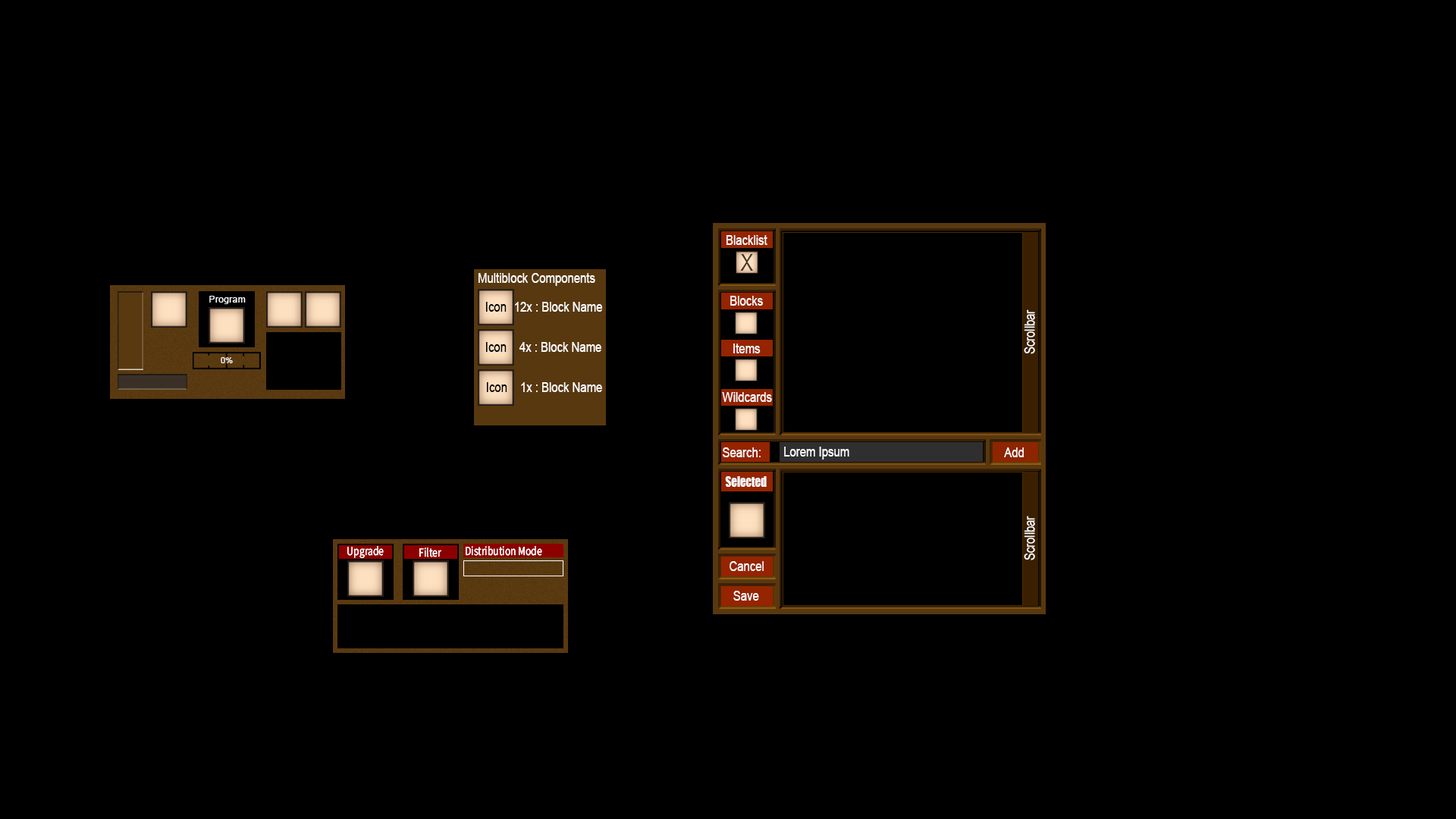
<style>
.page{position:relative;width:1456px;height:819px;background:#000000}
.page>*{position:absolute;margin:0}
.t1{font:13.8px "ArialMT";color:#ffffff;scale:0.82 1}
.t2{font:22.9px "ArialMT";color:#3f352c;scale:0.82 1}
.t3{font:9.5px "ArialMT";letter-spacing:0.01em;color:#ffffff}
.t4{font:13.8px "ArialMT";color:#000000;scale:0.82 1}
.t5{font:8.3px "ArialMT";letter-spacing:0.01em;color:#ffffff}
.t6{font:13.8px "Impact";color:#ffffff;scale:0.82 1}
.t7{font:12.6px "SourceSansRoman-Regular";color:#ffffff;font-weight:bold;scale:0.82 1}
</style>
<div class="page">
<p class="t1" style="left:726px;top:235px;width:41px;height:10px">Blacklist</p>
<p class="t2" style="left:740px;top:254px;width:13px;height:17px">X</p>
<p class="t1" style="left:479px;top:273px;width:116px;height:13px">Multiblock Components</p>
<p class="t3" style="left:209px;top:296px;width:37px;height:8px">Program</p>
<p class="t4" style="left:486px;top:302px;width:21px;height:10px">Icon</p>
<p class="t1" style="left:515px;top:302px;width:88px;height:10px">12x : Block Name</p>
<p class="t1" style="left:730px;top:296px;width:33px;height:10px">Blocks</p>
<p class="t1" style="left:1024px;top:309px;width:11px;height:45px;rotate:-90deg">Scrollbar</p>
<p class="t4" style="left:486px;top:342px;width:21px;height:10px">Icon</p>
<p class="t1" style="left:519px;top:342px;width:82px;height:10px">4x : Block Name</p>
<p class="t1" style="left:733px;top:344px;width:28px;height:9px">Items</p>
<p class="t5" style="left:221px;top:357px;width:12px;height:6px">0%</p>
<p class="t4" style="left:487px;top:382px;width:20px;height:10px">Icon</p>
<p class="t1" style="left:521px;top:382px;width:81px;height:10px">1x : Block Name</p>
<p class="t1" style="left:722px;top:392px;width:50px;height:10px">Wildcards</p>
<p class="t1" style="left:723px;top:447px;width:38px;height:10px">Search:</p>
<p class="t1" style="left:784px;top:447px;width:65px;height:13px">Lorem Ipsum</p>
<p class="t1" style="left:1004px;top:447px;width:20px;height:10px">Add</p>
<p class="t6" style="left:725px;top:476px;width:42px;height:11px">Selected</p>
<p class="t1" style="left:1024px;top:516px;width:11px;height:44px;rotate:-90deg">Scrollbar</p>
<p class="t7" style="left:347px;top:546px;width:37px;height:12px">Upgrade</p>
<p class="t7" style="left:466px;top:546px;width:76px;height:10px">Distribution Mode</p>
<p class="t7" style="left:419px;top:548px;width:22px;height:9px">Filter</p>
<p class="t1" style="left:730px;top:561px;width:34px;height:10px">Cancel</p>
<p class="t1" style="left:733px;top:591px;width:26px;height:10px">Save</p>
</div>
